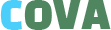
<style>
.page{position:relative;width:111px;height:30px;background:#4f865f}
.page>*{position:absolute;margin:0}
.t1{font:38px "BlackHanSans-Regular";letter-spacing:0.025em;color:#4f865f}
.t2{font:38px "BlackHanSans-Regular";letter-spacing:0.025em;color:#4bcffa}
</style>
<div class="page">
<p class="t1" style="left:0px;top:0px;width:111px;height:30px"><span class="t2">C</span>OVA</p>
</div>
